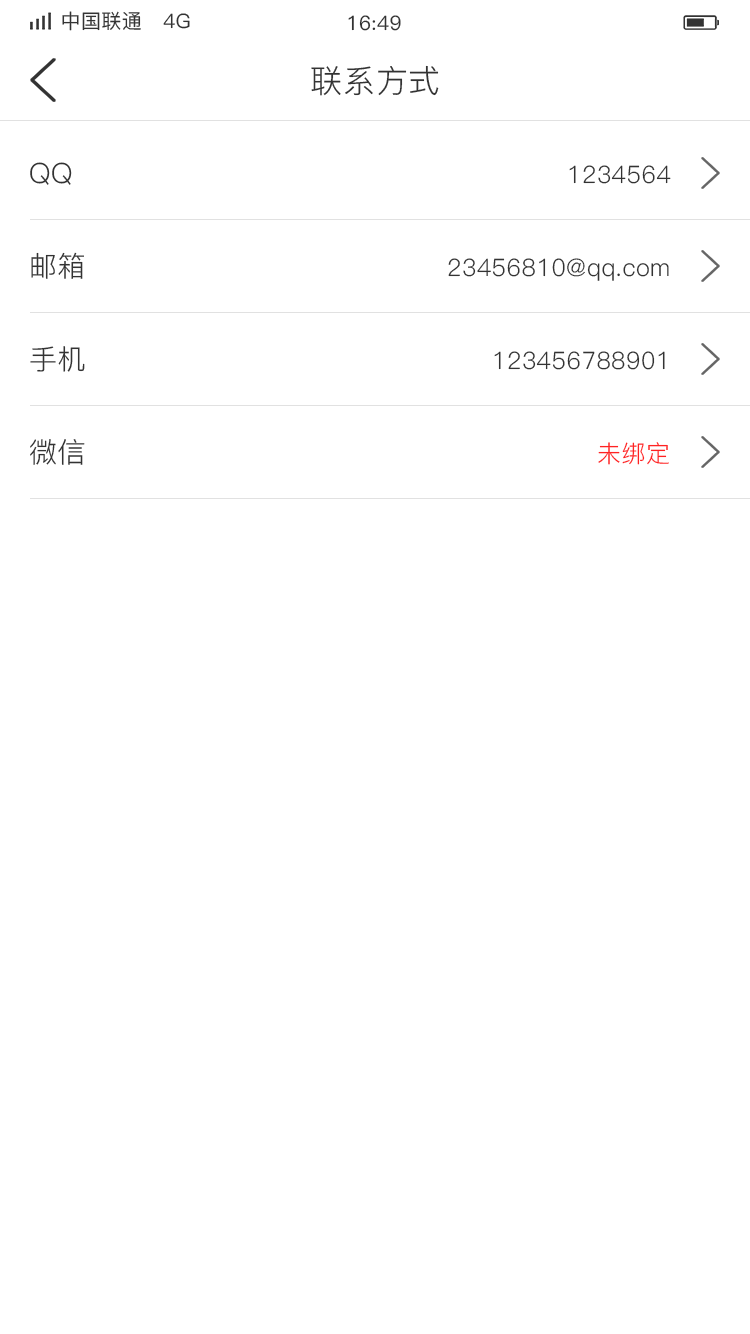
<style>
.page{position:relative;width:750px;height:1334px;background:#ffffff}
.page>*{position:absolute;margin:0}
.t1{font:20px "PingFang-SC-Medium";letter-spacing:0.02em;color:#333333}
.t2{font:32px "PingFang-SC-Regular";letter-spacing:0.02em;color:#333333}
.t3{font:28px "PingFang-SC-Regular";letter-spacing:0.02em;color:#333333}
.t4{font:24px "PingFang-SC-Regular";letter-spacing:0.02em;color:#333333}
.t5{font:24px "PingFang-SC-Regular";letter-spacing:0.02em;color:#ff2323}
</style>
<div class="page">
<p class="t1" style="left:62px;top:11px;width:128px;height:20px">中国联通   4G</p>
<p class="t1" style="left:348px;top:15px;width:53px;height:16px">16:49</p>
<p class="t2" style="left:311px;top:65px;width:128px;height:31px">联系方式</p>
<p class="t3" style="left:30px;top:162px;width:42px;height:23px">QQ</p>
<p class="t4" style="left:569px;top:165px;width:102px;height:19px">1234564</p>
<p class="t3" style="left:31px;top:252px;width:53px;height:27px">邮箱</p>
<p class="t4" style="left:448px;top:258px;width:221px;height:23px">23456810@qq.com</p>
<p class="t3" style="left:30px;top:346px;width:55px;height:26px">手机</p>
<p class="t4" style="left:494px;top:351px;width:171px;height:19px">123456788901</p>
<p class="t3" style="left:30px;top:439px;width:55px;height:26px">微信</p>
<p class="t5" style="left:598px;top:442px;width:71px;height:23px">未绑定</p>
</div>
